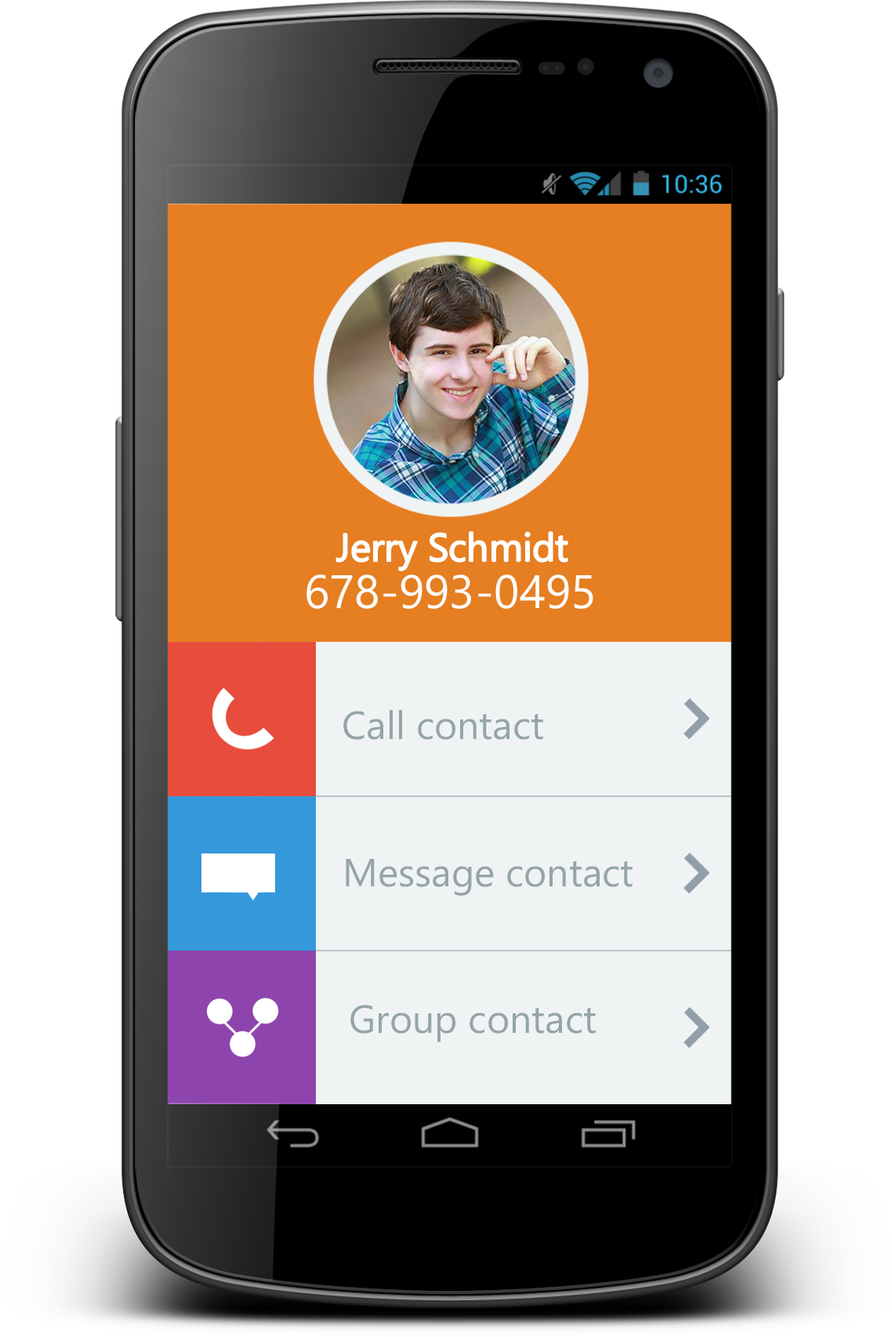
<style>
.page{position:relative;width:892px;height:1337px;background:#ffffff}
.page>*{position:absolute;margin:0}
.t1{font:39.2px "SegoeWP";color:#ffffff}
.t2{font:47px "SegoeWP";color:#ffffff}
.t3{font:39.2px "SegoeWP";color:#95a5a6}
</style>
<div class="page">
<p class="t1" style="left:336px;top:532px;width:231px;height:39px">Jerry Schmidt</p>
<p class="t2" style="left:306px;top:574px;width:287px;height:35px">678-993-0495</p>
<p class="t3" style="left:343px;top:710px;width:200px;height:30px">Call contact</p>
<p class="t3" style="left:346px;top:859px;width:286px;height:37px">Message contact</p>
<p class="t3" style="left:350px;top:1005px;width:246px;height:37px">Group contact</p>
</div>
